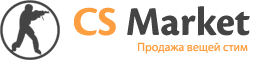
<style>
.page{position:relative;width:275px;height:60px;background:#ffffff}
.page>*{position:absolute;margin:0}
.t1{font:42px "CronosPro-Bold";color:#444444}
.t2{font:42px "CronosPro-Bold";color:#fd9e40}
.t3{font:12px "MyriadPro-Regular";color:#fd9e40}
</style>
<div class="page">
<p class="t1" style="left:74px;top:6px;width:176px;height:30px"><span class="t2">CS</span> Market</p>
<p class="t3" style="left:138px;top:42px;width:110px;height:12px">Продажа вещей стим</p>
</div>
